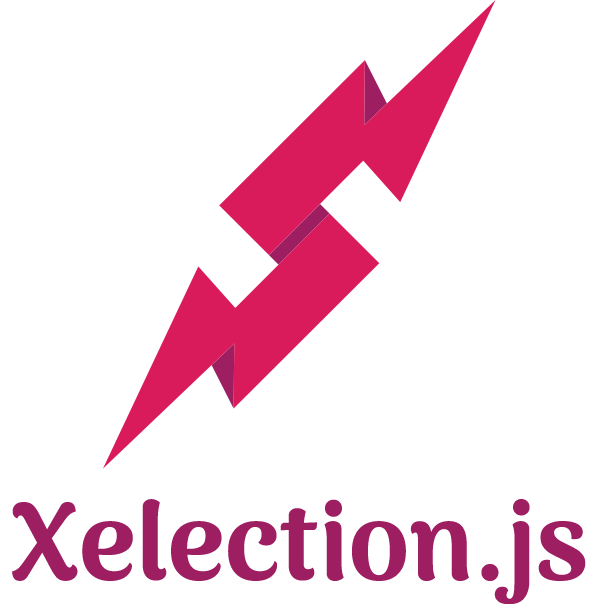
<style>
.page{position:relative;width:604px;height:604px;background:#ffffff}
.page>*{position:absolute;margin:0}
.t1{font:108.3px "ArimaMadurai-Black";letter-spacing:-0.025em;color:#9e1e62;font-weight:bold}
</style>
<div class="page">
<p class="t1" style="left:12px;top:499px;width:574px;height:106px">Xelection.js</p>
</div>
